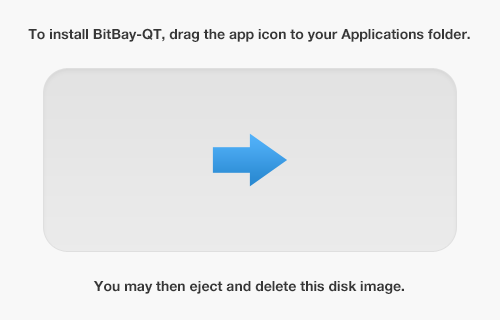
<style>
.page{position:relative;width:500px;height:320px;background:#f8f8f8}
.page>*{position:absolute;margin:0}
.t1{font:14px "HelveticaNeueLTPro-Bd";color:#373737}
</style>
<div class="page">
<p class="t1" style="left:28px;top:28px;width:442px;height:14px">To install BitBay-QT, drag the app icon to your Applications folder.</p>
<p class="t1" style="left:93px;top:281px;width:311px;height:13px">You may then eject and delete this disk image.</p>
</div>
